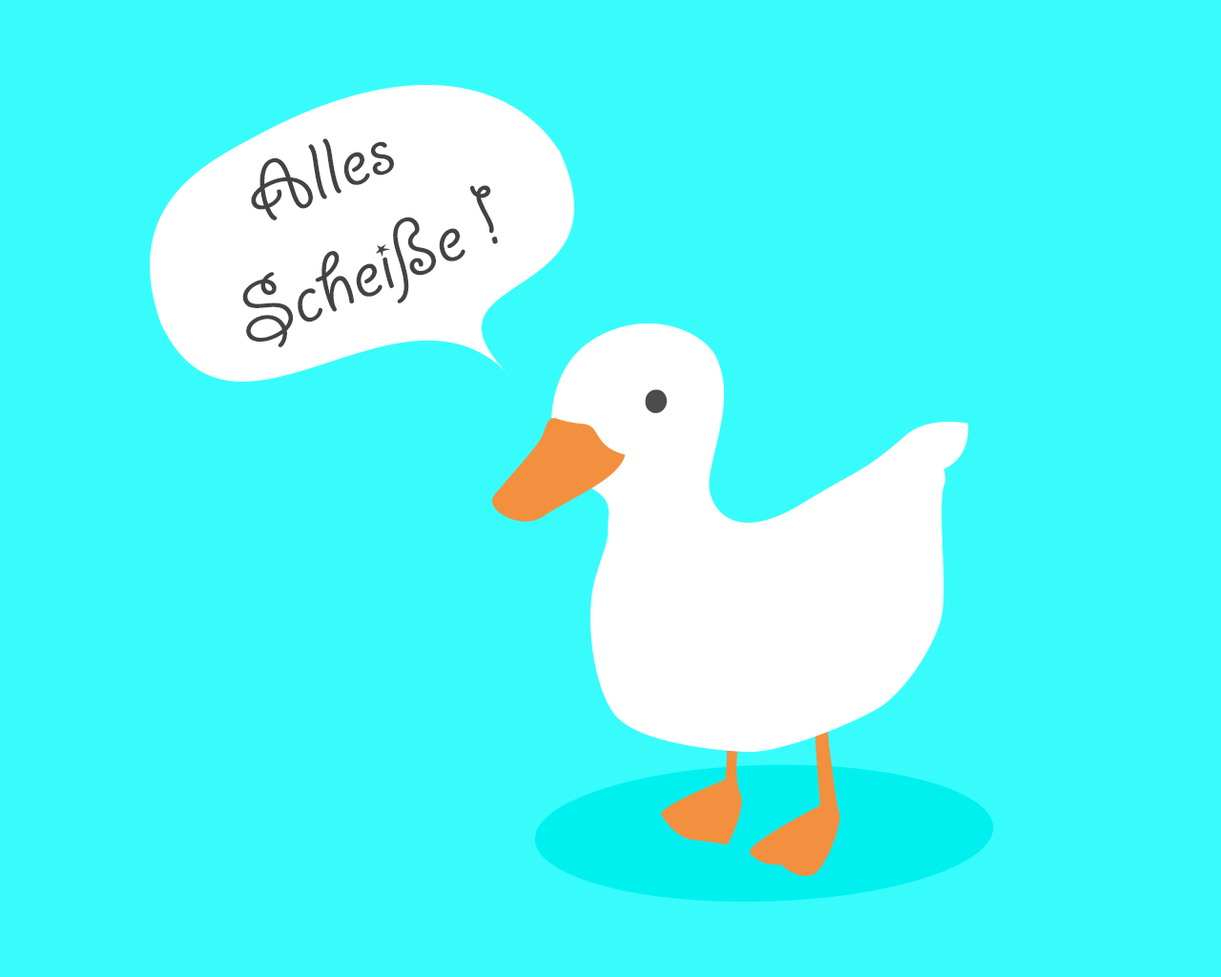
<style>
.page{position:relative;width:1221px;height:977px;background:#38fcfc}
.page>*{position:absolute;margin:0}
.t1{font:89.2px "GiddyupStd";color:#434343;scale:1.09 1}
</style>
<div class="page">
<p class="t1" style="left:242px;top:138px;width:256px;height:209px;text-align:center;rotate:-23deg">Alles <br>Scheiße !</p>
</div>
